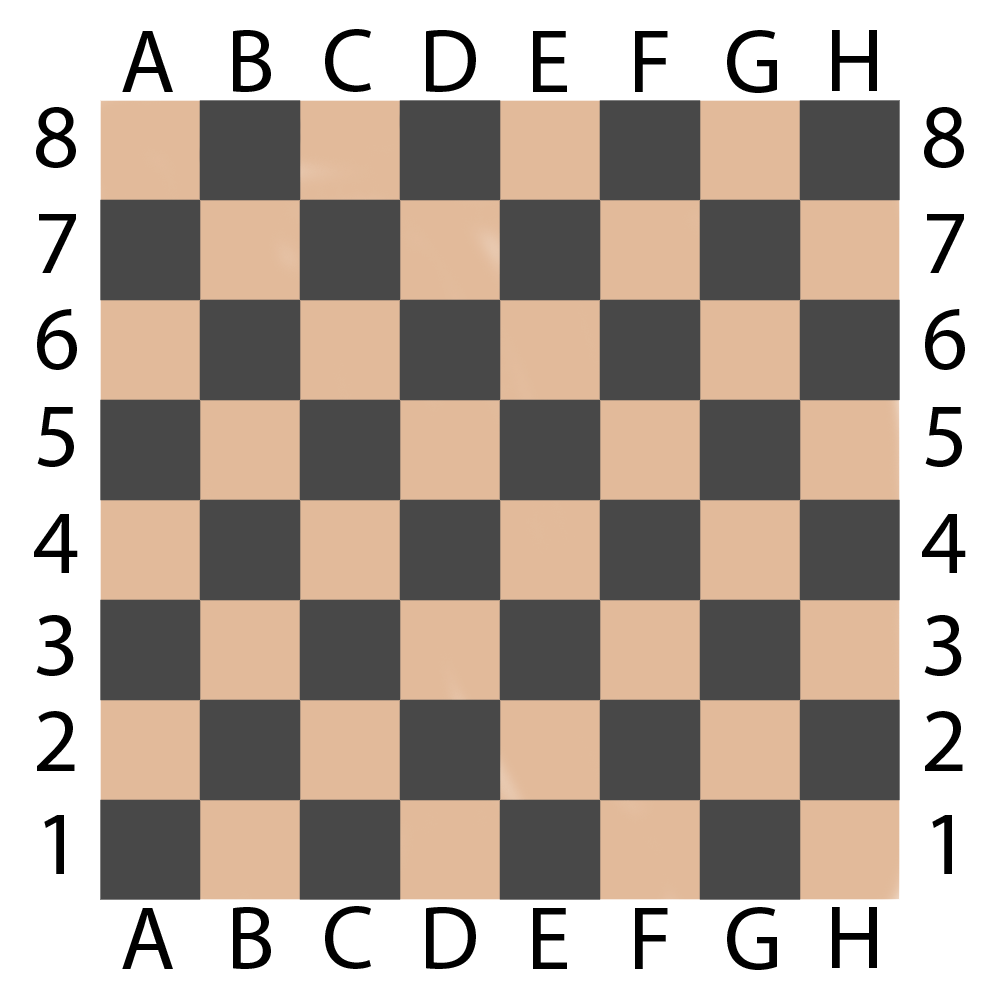
<style>
.page{position:relative;width:1000px;height:1000px;background:#484848}
.page>*{position:absolute;margin:0}
.t1{font:90px "MyriadPro-Regular";color:#000000}
</style>
<div class="page">
<p class="t1" style="left:233px;top:30px;width:38px;height:62px">B</p>
<p class="t1" style="left:325px;top:29px;width:46px;height:63px">C</p>
<p class="t1" style="left:426px;top:30px;width:50px;height:62px">D</p>
<p class="t1" style="left:727px;top:30px;width:50px;height:63px">G</p>
<p class="t1" style="left:832px;top:30px;width:45px;height:61px">H</p>
<p class="t1" style="left:122px;top:31px;width:51px;height:61px">A</p>
<p class="t1" style="left:533px;top:31px;width:34px;height:61px">E</p>
<p class="t1" style="left:635px;top:31px;width:33px;height:61px">F</p>
<p class="t1" style="left:36px;top:107px;width:40px;height:61px">8</p>
<p class="t1" style="left:924px;top:107px;width:40px;height:61px">8</p>
<p class="t1" style="left:39px;top:214px;width:37px;height:59px">7</p>
<p class="t1" style="left:927px;top:214px;width:37px;height:59px">7</p>
<p class="t1" style="left:37px;top:309px;width:40px;height:61px">6</p>
<p class="t1" style="left:925px;top:309px;width:40px;height:61px">6</p>
<p class="t1" style="left:37px;top:407px;width:37px;height:60px">5</p>
<p class="t1" style="left:925px;top:407px;width:37px;height:60px">5</p>
<p class="t1" style="left:34px;top:514px;width:44px;height:59px">4</p>
<p class="t1" style="left:922px;top:514px;width:44px;height:59px">4</p>
<p class="t1" style="left:36px;top:615px;width:38px;height:61px">3</p>
<p class="t1" style="left:924px;top:615px;width:38px;height:61px">3</p>
<p class="t1" style="left:37px;top:711px;width:38px;height:60px">2</p>
<p class="t1" style="left:925px;top:711px;width:38px;height:60px">2</p>
<p class="t1" style="left:44px;top:815px;width:20px;height:59px">1</p>
<p class="t1" style="left:932px;top:815px;width:20px;height:59px">1</p>
<p class="t1" style="left:122px;top:908px;width:51px;height:61px">A</p>
<p class="t1" style="left:233px;top:907px;width:38px;height:62px">B</p>
<p class="t1" style="left:325px;top:906px;width:46px;height:63px">C</p>
<p class="t1" style="left:426px;top:907px;width:50px;height:62px">D</p>
<p class="t1" style="left:533px;top:908px;width:34px;height:61px">E</p>
<p class="t1" style="left:635px;top:908px;width:33px;height:61px">F</p>
<p class="t1" style="left:727px;top:907px;width:50px;height:63px">G</p>
<p class="t1" style="left:832px;top:907px;width:45px;height:61px">H</p>
</div>
